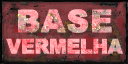
<style>
.page{position:relative;width:128px;height:64px}
.page>*{position:absolute;margin:0}
.t1{font:20px/21.3px "Arial-Black";letter-spacing:-0.035em;text-transform:uppercase;font-weight:bold;scale:0.94 1}
.t2{font:30.7px/28px "Arial-Black";letter-spacing:0.025em;text-transform:uppercase;font-weight:bold}
</style>
<div class="page">
<p class="t1" style="left:6px;top:9px;width:117px;height:45px;text-align:center"><span class="t2">BASE<br></span>VERMELHA</p>
<p class="t1" style="left:6px;top:9px;width:117px;height:45px;text-align:center"><span class="t2">BASE<br></span>VERMELHA</p>
</div>
